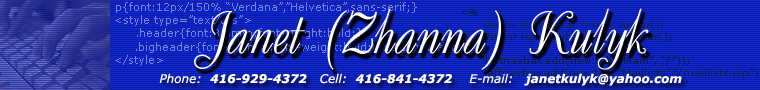
<style>
.page{position:relative;width:760px;height:90px;background:#1b2ba1}
.page>*{position:absolute;margin:0}
.t1{font:60px "UkrainianDecor";color:#ffffff}
.t2{font:12px "Verdana-BoldItalic";color:#ffffff}
.t3{font:12px "Verdana-Italic";color:#f1f2f6}
.t4{font:12px "Verdana-Italic";color:#ffffff}
</style>
<div class="page">
<p class="t1" style="left:194px;top:8px;width:455px;height:62px">Janet (Zhanna) Kulyk</p>
<p class="t2" style="left:159px;top:73px;width:523px;height:13px"><span class="t3">                                                                                                                    </span><span class="t4">Phone:  </span>416-929-4372<span class="t4">   Cell:  </span>416-841-4372<span class="t4">    E-mail:   </span>janetkulyk@yahoo.com</p>
</div>
